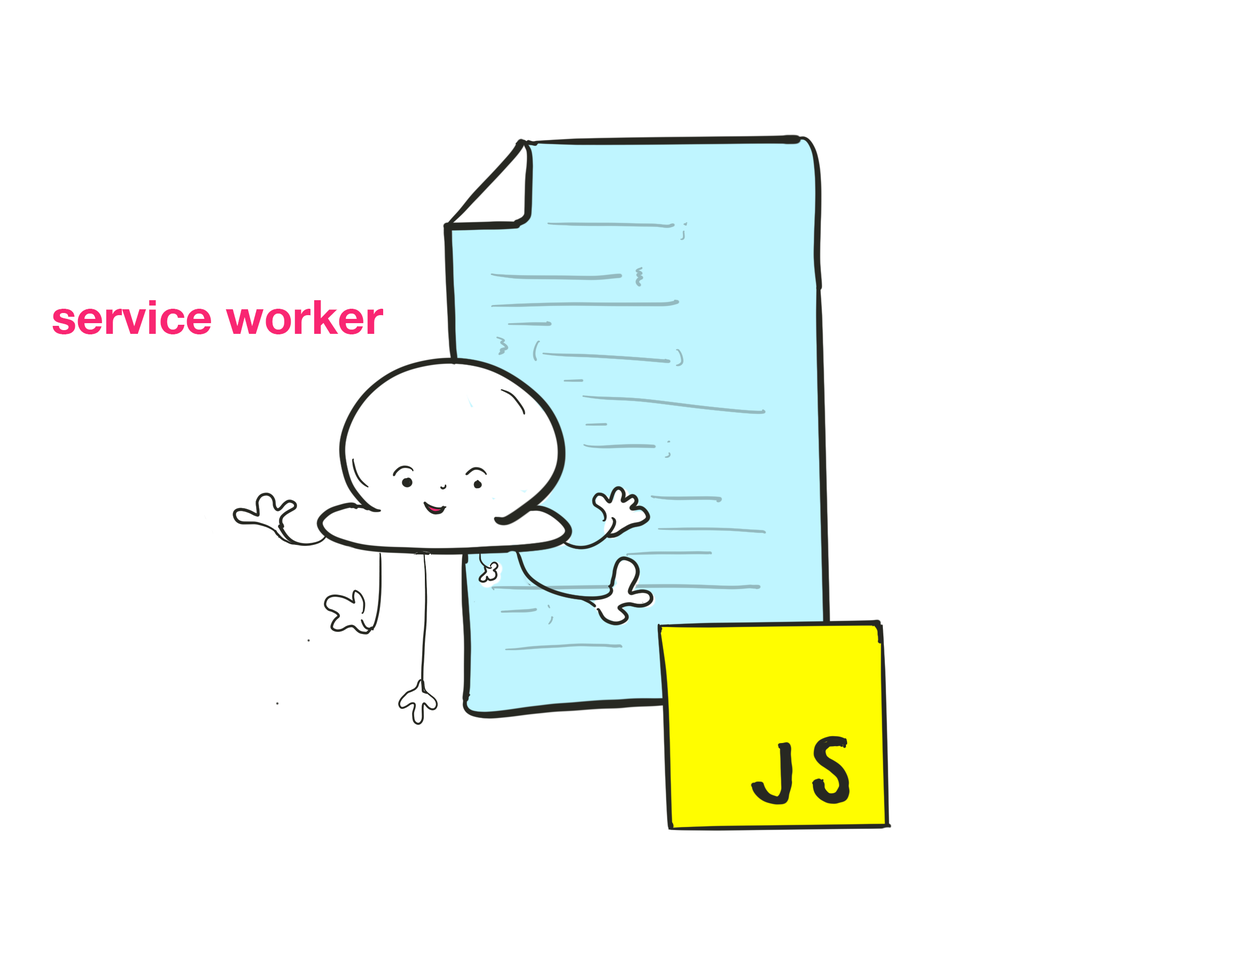
<style>
.page{position:relative;width:1250px;height:954px;background:#ffffff}
.page>*{position:absolute;margin:0}
.t1{font:47px "HelveticaNeue-Bold";color:#f92672}
</style>
<div class="page">
<p class="t1" style="left:52px;top:300px;width:331px;height:34px">service worker</p>
</div>
